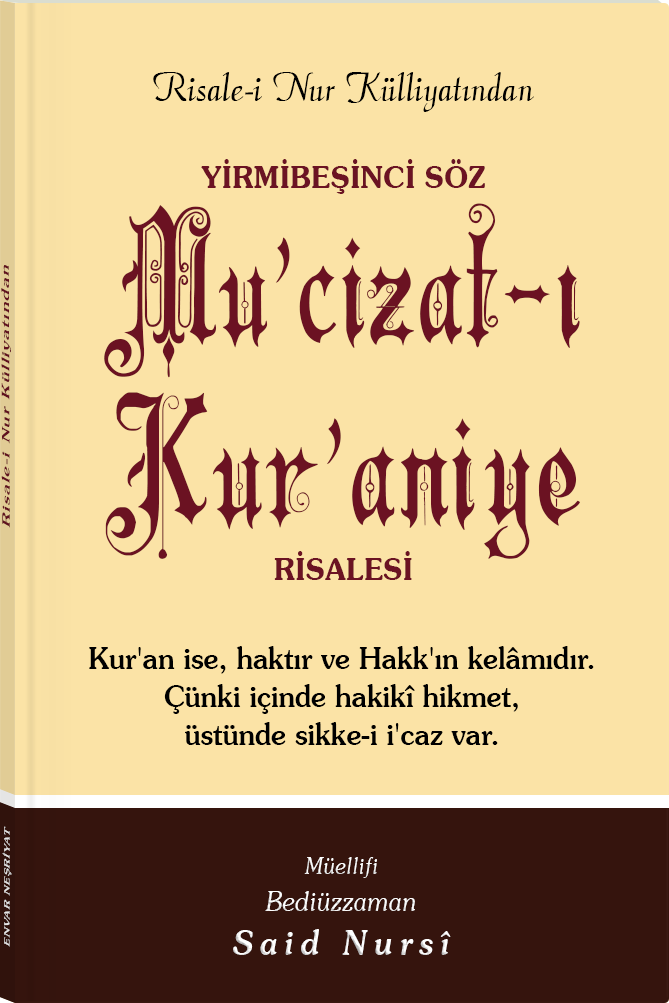
<style>
.page{position:relative;width:669px;height:1003px;background:#fbe3a6}
.page>*{position:absolute;margin:0}
.t1{font:45.3px "Barla © 072 Aria ScriptScriptSSi";color:#000000;scale:0.94 1}
.t2{font:30.3px "SouvenirITCbyBT-Demi";color:#6b1323;scale:0.94 1}
.t3{font:176.3px/157.3px "Barla © 001 Liva Nur";letter-spacing:-0.001em;color:#6b1222;scale:0.93 1}
.t4{font:178px/181.8px "Barla © 001 Liva Nur";letter-spacing:-0.001em;color:#6b1222;scale:0.93 1}
.t5{font:11.4px "Souvenir-Medium";letter-spacing:0.08em;color:#6b1323;scale:1.65 1}
.t6{font:30.3px/38px "Souvenir-Medium";color:#000000;scale:0.92 1}
.t7{font:8.3px "Souvenir-Medium";letter-spacing:0.08em;color:#e5e5e5;scale:1.43 1}
.t8{font:27.1px/37.8px "Souvenir-LightItalic";color:#ffffff;scale:0.92 1}
.t9{font:22.8px/39.8px "Souvenir-LightItalic";color:#ffffff;scale:0.92 1}
.t10{font:33.9px/43.8px "Souvenir-MediumItalic";letter-spacing:0.2em;color:#ffffff;scale:0.92 1}
</style>
<div class="page">
<p class="t1" style="left:153px;top:72px;width:381px;height:40px">Risale-i Nur Külliyatından</p>
<p class="t2" style="left:201px;top:159px;width:284px;height:35px">YİRMİBEŞİNCİ SÖZ</p>
<p class="t3" style="left:104px;top:203px;width:476px;height:356px;text-align:center">Mu’cizat-ı<br><span class="t4">Kur’aniye</span></p>
<p class="t5" style="left:1px;top:265px;width:10px;height:263px;rotate:-90deg">Risale-i Nur Külliyatından</p>
<p class="t2" style="left:274px;top:551px;width:138px;height:29px">RİSALESİ</p>
<p class="t6" style="left:89px;top:646px;width:505px;height:99px;text-align:center">Kur'an ise, haktır ve Hakk'ın kelâmıdır. Çünki içinde hakikî hikmet,<br>üstünde sikke-i i'caz var.</p>
<p class="t7" style="left:2px;top:826px;width:10px;height:121px;rotate:-90deg">ENVAR NEŞRİYAT</p>
<p class="t8" style="left:233px;top:857px;width:218px;height:98px;text-align:center"><span class="t9">Müellifi<br></span>Bediüzzaman<br><span class="t10">Said Nursî</span></p>
</div>
